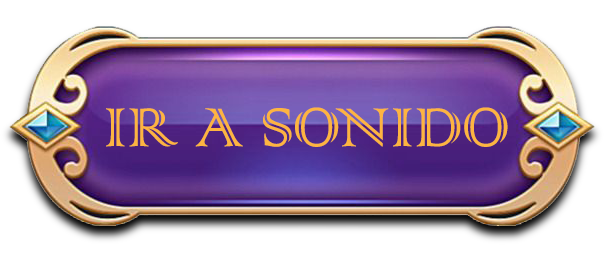
<style>
.page{position:relative;width:614px;height:264px;background:#ffffff}
.page>*{position:absolute;margin:0}
.t1{font:72px "ColonnaMT";color:#fdb441}
</style>
<div class="page">
<p class="t1" style="left:106px;top:107px;width:402px;height:40px">IR A SONIDO</p>
</div>
